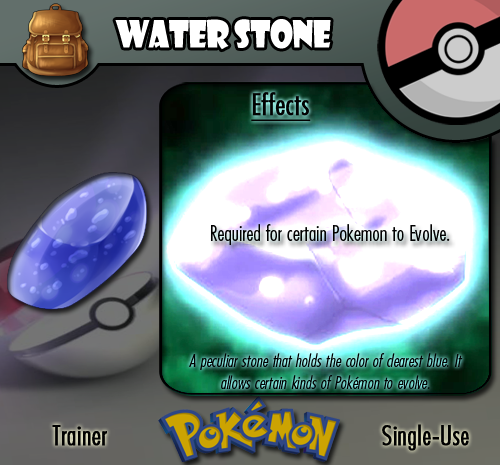
<style>
.page{position:relative;width:500px;height:465px}
.page>*{position:absolute;margin:0}
.t1{font:36.7px "ShowcardGothic-Reg";letter-spacing:-0.025em;color:#ffffff;scale:0.91 1}
.t2{font:22.2px "FuturaCondensedBQ-Light";color:#020202}
.t3{font:27.8px "FuturaCondensedBQ-Light";color:#020202;font-weight:bold}
.t4{font:30.6px "FuturaCondensedBQ-Light";color:#020202;font-weight:bold;text-decoration:underline}
.t5{font:18.1px "FuturaCondensedBQ-Light";color:#010101;font-style:italic}
.t6{font:27.8px "FuturaCondensedBQ-Light";color:#010101;font-weight:bold}
</style>
<div class="page">
<p class="t1" style="left:115px;top:19px;width:216px;height:31px">Water Stone</p>
<p class="t2" style="left:211px;top:92px;width:239px;height:153px"><span class="t3">  </span><span class="t4">Effects<br><br><br><br></span>Required for certain Pokemon to Evolve.</p>
<p class="t5" style="left:189px;top:353px;width:274px;height:36px;text-align:center">A peculiar stone that holds the color of clearest blue. It allows certain kinds of Pokémon to evolve.</p>
<p class="t6" style="left:52px;top:425px;width:55px;height:21px">Trainer</p>
<p class="t6" style="left:382px;top:424px;width:87px;height:27px">Single-Use</p>
</div>
